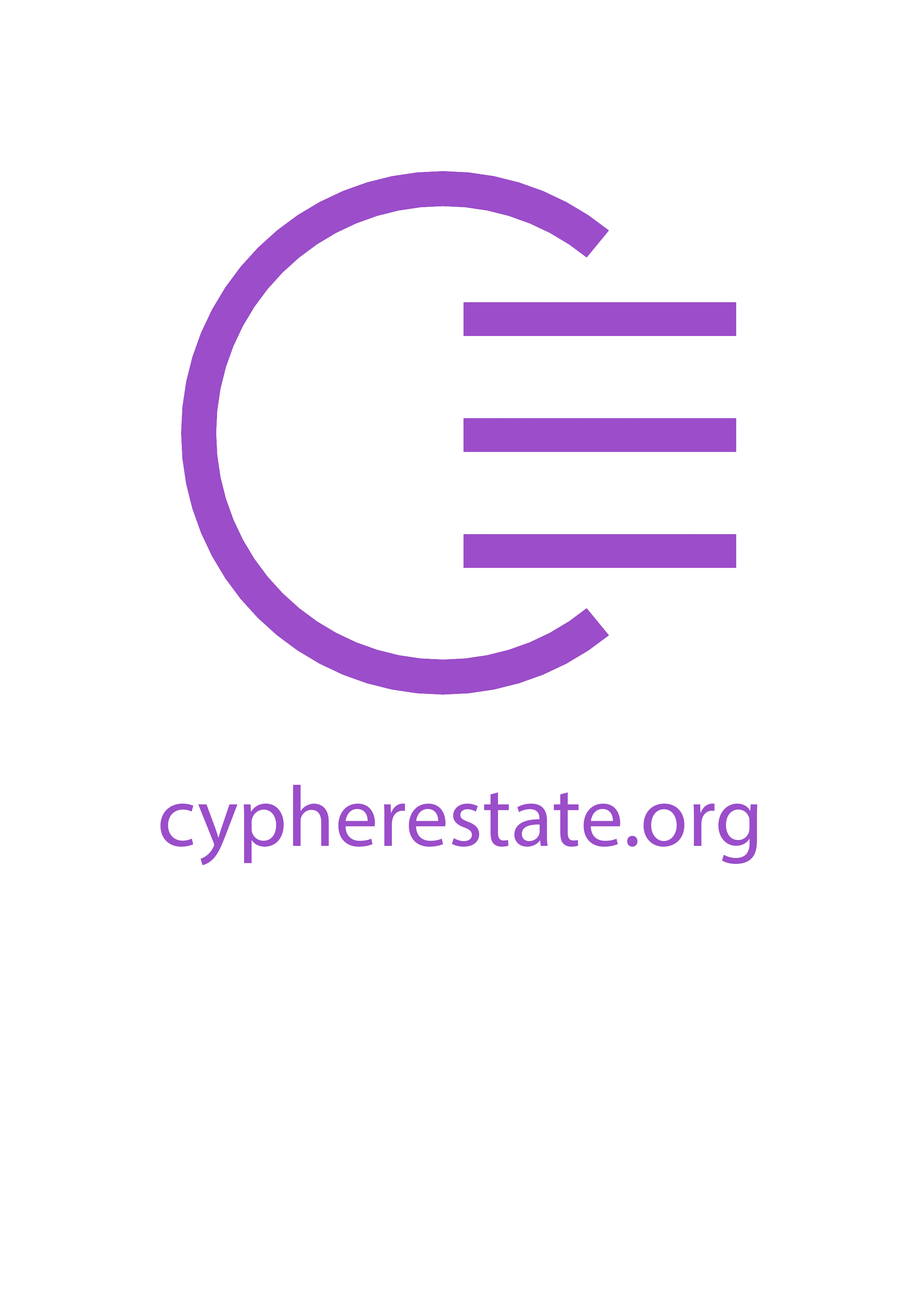
<style>
.page{position:relative;width:918px;height:1299px;background:#ffffff}
.page>*{position:absolute;margin:0}
.t1{font:86.2px "MyriadPro-Regular";color:#9b4dca}
</style>
<div class="page">
<p class="t1" style="left:160px;top:785px;width:597px;height:81px">cypherestate.org</p>
</div>
